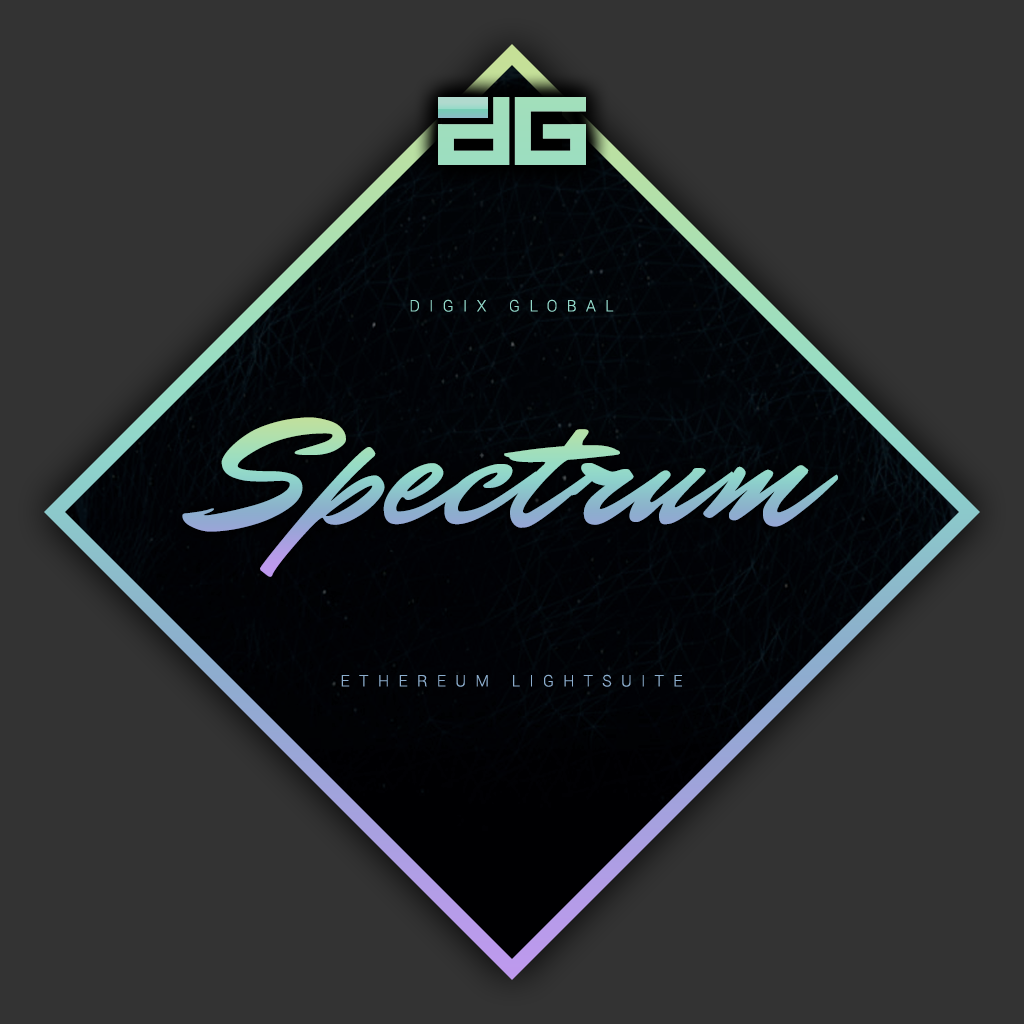
<style>
.page{position:relative;width:1024px;height:1024px;background:#333333}
.page>*{position:absolute;margin:0}
.t1{font:16px "Roboto-Light";letter-spacing:0.58em;color:#92d8c9;text-transform:uppercase}
.t2{font:163.7px "MrDafoe-Regular";letter-spacing:0.02em}
.t3{font:16px "Roboto-Light";letter-spacing:0.58em;color:#8daece;text-transform:uppercase}
</style>
<div class="page">
<p class="t1" style="left:410px;top:299px;width:204px;height:13px">digix global</p>
<p class="t2" style="left:182px;top:417px;width:656px;height:160px">Spectrum</p>
<p class="t3" style="left:341px;top:674px;width:341px;height:13px">ethereum lightsuite</p>
</div>
